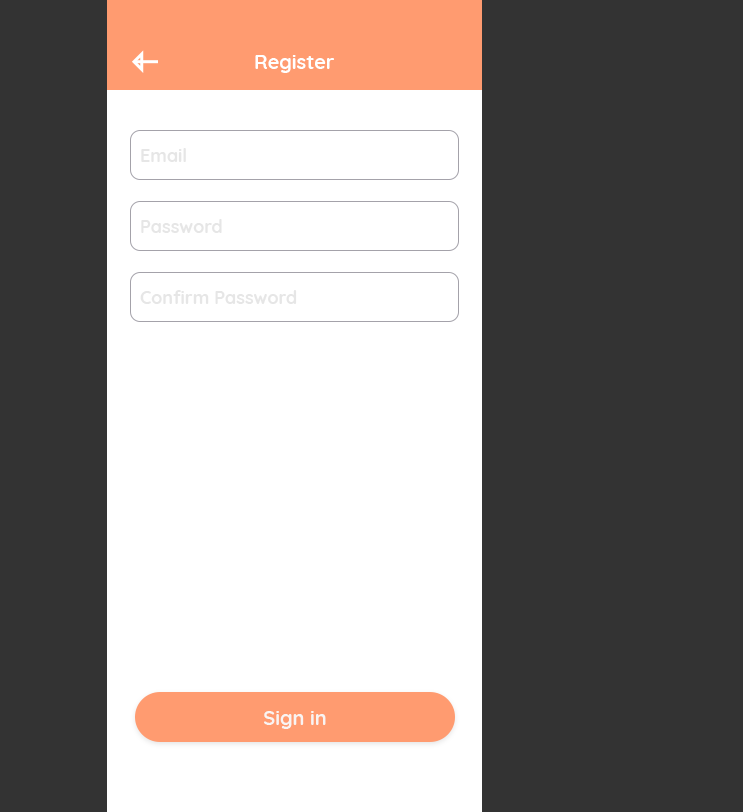
<style>
.page{position:relative;width:743px;height:812px;background:#333333}
.page>*{position:absolute;margin:0}
.t1{font:20px "Quicksand-Bold";color:#ffffff}
.t2{font:18px "Quicksand-Bold";color:#e6e6e6}
.t3{font:20px "Quicksand-Bold";color:#f9f4f2}
</style>
<div class="page">
<p class="t1" style="left:255px;top:55px;width:79px;height:18px">Register</p>
<p class="t2" style="left:141px;top:148px;width:45px;height:14px">Email</p>
<p class="t2" style="left:141px;top:219px;width:81px;height:14px">Password</p>
<p class="t2" style="left:140px;top:290px;width:157px;height:14px">Confirm Password</p>
<p class="t3" style="left:264px;top:711px;width:62px;height:18px">Sign in</p>
</div>
